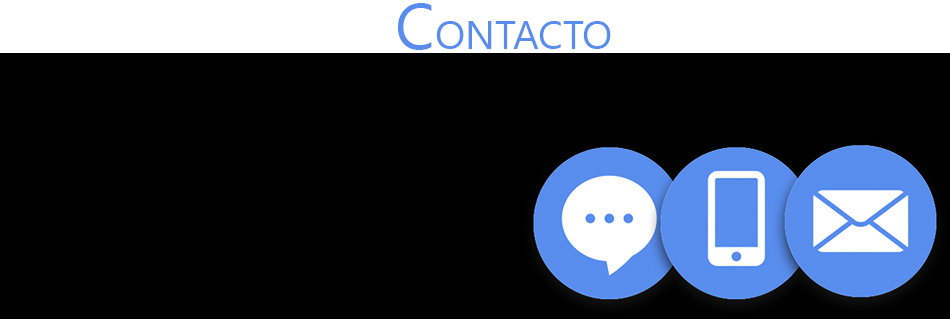
<style>
.page{position:relative;width:950px;height:319px;background:#000000}
.page>*{position:absolute;margin:0}
.t1{font:40px "Gadugi";color:#588ded}
.t2{font:64px "Gadugi";color:#588ded}
</style>
<div class="page">
<p class="t1" style="left:398px;top:3px;width:213px;height:47px"><span class="t2">C</span>ONTACTO</p>
</div>
